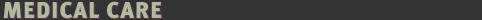
<style>
.page{position:relative;width:482px;height:20px;background:#333333}
.page>*{position:absolute;margin:0}
.t1{font:23px "MetaBlackCapsC";letter-spacing:0.05em;color:#b2ba9a;text-transform:uppercase}
</style>
<div class="page">
<p class="t1" style="left:3px;top:1px;width:159px;height:18px">MEDICAL CARE</p>
</div>
